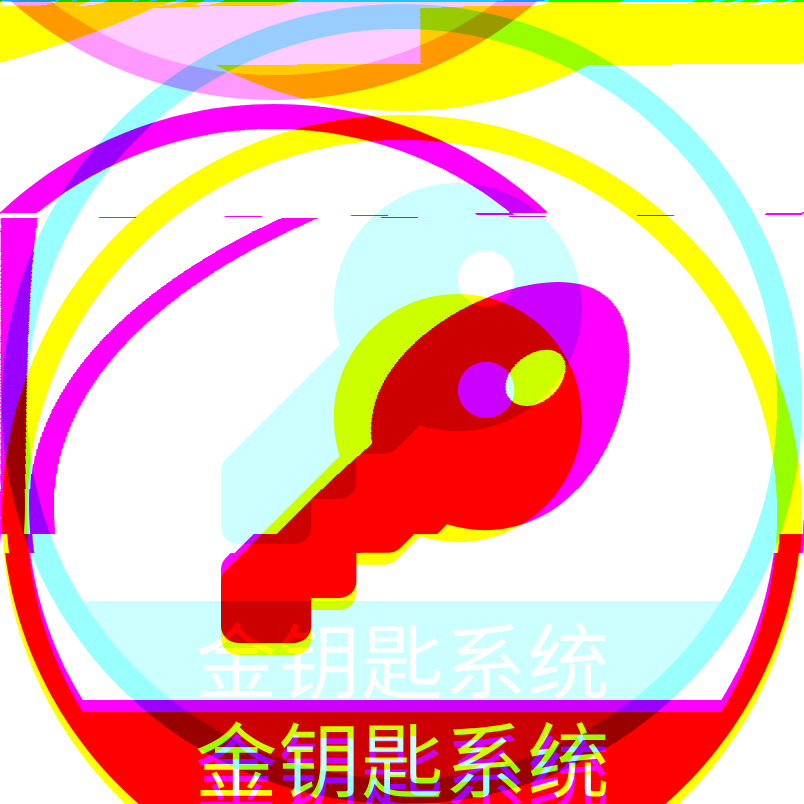
<style>
.page{position:relative;width:804px;height:804px;background:#ffffff}
.page>*{position:absolute;margin:0}
.t1{font:83.1px "MicrosoftYaHei";color:#ffffff}
</style>
<div class="page">
<p class="t1" style="left:197px;top:620px;width:410px;height:78px">金钥匙系统</p>
</div>
